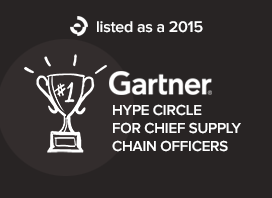
<style>
.page{position:relative;width:272px;height:198px;background:#282424}
.page>*{position:absolute;margin:0}
.t1{font:16px "ProximaNova-Semibold";letter-spacing:-0.015em;color:#ffffff}
.t2{font:15px/18px "ProximaNova-Semibold";letter-spacing:-0.015em;color:#ffffff}
</style>
<div class="page">
<p class="t1" style="left:97px;top:21px;width:106px;height:12px">listed as a 2015</p>
<p class="t2" style="left:112px;top:104px;width:129px;height:48px">HYPE CIRCLE <br>FOR CHIEF SUPPLY<br>CHAIN OFFICERS</p>
</div>
